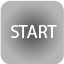
<style>
.page{position:relative;width:64px;height:64px}
.page>*{position:absolute;margin:0}
.t1{font:18px "MyriadPro-Regular";color:#ffffff}
</style>
<div class="page">
<p class="t1" style="left:11px;top:25px;width:46px;height:13px">START</p>
</div>
